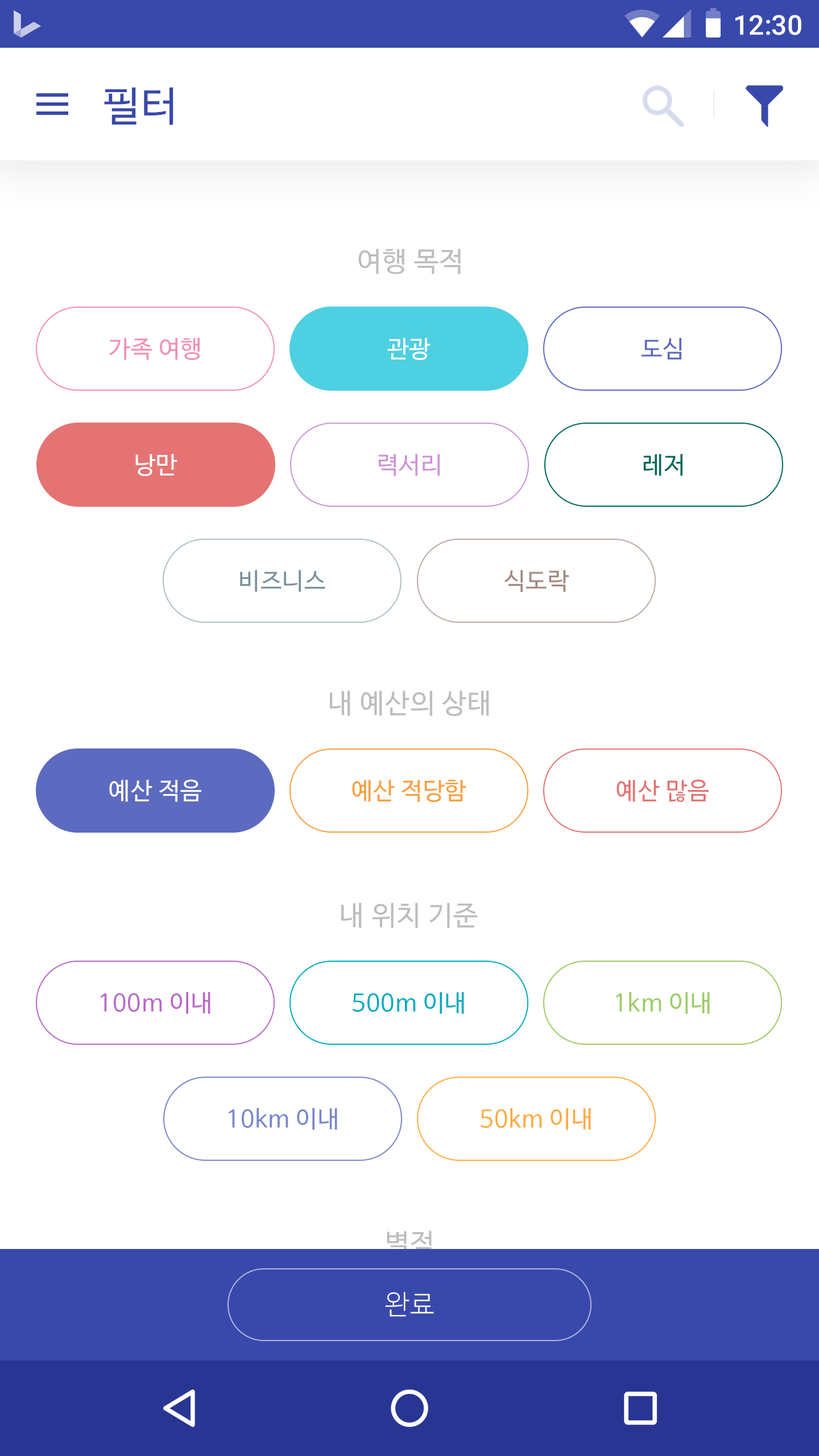
<style>
.page{position:relative;width:819px;height:1456px;background:#ffffff}
.page>*{position:absolute;margin:0}
.t1{font:27.3px "Roboto-Medium";color:#ffffff}
.t2{font:40.9px "NanumBarunGothic";letter-spacing:0.025em;color:#3949ab}
.t3{font:27.3px "NanumBarunGothic";letter-spacing:0.025em;color:#bdbdbd}
.t4{font:23.9px "NanumBarunGothic";letter-spacing:0.025em;color:#f48fb1}
.t5{font:23.9px "NanumBarunGothic";letter-spacing:0.025em;color:#ffffff}
.t6{font:23.9px "NanumBarunGothic";letter-spacing:0.025em;color:#5c6bc0}
.t7{font:23.9px "NanumBarunGothic";letter-spacing:0.025em;color:#ce93d8}
.t8{font:23.9px "NanumBarunGothic";letter-spacing:0.025em;color:#00695c}
.t9{font:23.9px "NanumBarunGothic";letter-spacing:0.025em;color:#78909c}
.t10{font:23.9px "NanumBarunGothic";letter-spacing:0.025em;color:#a1887f}
.t11{font:23.9px "NanumBarunGothic";letter-spacing:0.025em;color:#f99f3d}
.t12{font:23.9px "NanumBarunGothic";letter-spacing:0.025em;color:#e57373}
.t13{font:23.9px "NanumBarunGothic";letter-spacing:0.025em;color:#ba68c8}
.t14{font:23.9px "NanumBarunGothic";letter-spacing:0.025em;color:#00acc1}
.t15{font:23.9px "NanumBarunGothic";letter-spacing:0.025em;color:#9ccc65}
.t16{font:23.9px "NanumBarunGothic";letter-spacing:0.025em;color:#7986cb}
.t17{font:23.9px "NanumBarunGothic";letter-spacing:0.025em;color:#ffab40}
.t18{font:27.3px "NanumBarunGothicLight";letter-spacing:0.025em;color:#fafafa}
</style>
<div class="page">
<p class="t1" style="left:735px;top:15px;width:66px;height:20px">12:30</p>
<p class="t2" style="left:104px;top:87px;width:69px;height:38px">필터</p>
<p class="t3" style="left:358px;top:249px;width:103px;height:25px">여행 목적</p>
<p class="t4" style="left:109px;top:338px;width:91px;height:22px">가족 여행</p>
<p class="t5" style="left:387px;top:338px;width:44px;height:22px">관광</p>
<p class="t6" style="left:642px;top:338px;width:39px;height:21px">도심</p>
<p class="t5" style="left:135px;top:454px;width:42px;height:22px">낭만</p>
<p class="t7" style="left:378px;top:454px;width:62px;height:22px">력서리</p>
<p class="t8" style="left:643px;top:454px;width:39px;height:22px">레저</p>
<p class="t9" style="left:240px;top:570px;width:85px;height:22px">비즈니스</p>
<p class="t10" style="left:504px;top:570px;width:65px;height:22px">식도락</p>
<p class="t3" style="left:330px;top:690px;width:159px;height:26px">내 예산의 상태</p>
<p class="t5" style="left:109px;top:779px;width:92px;height:23px">예산 적음</p>
<p class="t11" style="left:352px;top:780px;width:114px;height:22px">예산 적당함</p>
<p class="t12" style="left:617px;top:779px;width:92px;height:23px">예산 많음</p>
<p class="t3" style="left:341px;top:903px;width:137px;height:25px">내 위치 기준</p>
<p class="t13" style="left:101px;top:992px;width:109px;height:22px">100m 이내</p>
<p class="t14" style="left:353px;top:992px;width:111px;height:22px">500m 이내</p>
<p class="t15" style="left:616px;top:992px;width:94px;height:22px">1km 이내</p>
<p class="t16" style="left:229px;top:1108px;width:108px;height:22px">10km 이내</p>
<p class="t17" style="left:481px;top:1108px;width:110px;height:22px">50km 이내</p>
<p class="t3" style="left:387px;top:1231px;width:45px;height:25px">별점</p>
<p class="t18" style="left:385px;top:1292px;width:49px;height:25px">완료</p>
</div>
